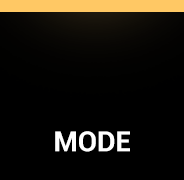
<style>
.page{position:relative;width:184px;height:180px;background:#000000}
.page>*{position:absolute;margin:0}
.t1{font:28px "Roboto-Bold";color:#ffffff}
</style>
<div class="page">
<p class="t1" style="left:55px;top:131px;width:75px;height:21px">MODE</p>
</div>
